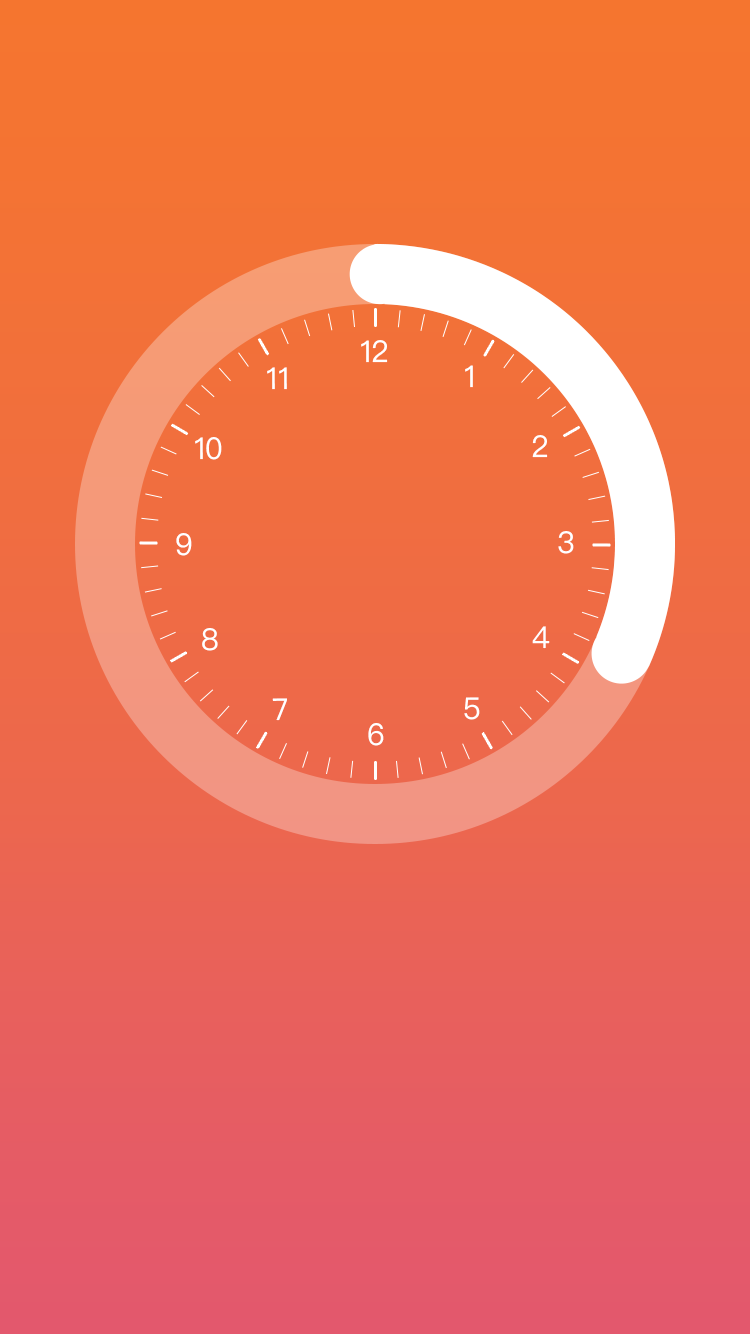
<style>
.page{position:relative;width:750px;height:1334px}
.page>*{position:absolute;margin:0}
.t1{font:30px "PingFangSC-Regular";letter-spacing:-0.02em;color:#ffffff}
</style>
<div class="page">
<p class="t1" style="left:361px;top:340px;width:27px;height:23px">12</p>
<p class="t1" style="left:465px;top:365px;width:8px;height:23px">1</p>
<p class="t1" style="left:267px;top:367px;width:20px;height:23px">11</p>
<p class="t1" style="left:195px;top:437px;width:27px;height:23px">10</p>
<p class="t1" style="left:532px;top:435px;width:16px;height:23px">2</p>
<p class="t1" style="left:176px;top:533px;width:16px;height:23px">9</p>
<p class="t1" style="left:558px;top:531px;width:16px;height:23px">3</p>
<p class="t1" style="left:202px;top:628px;width:16px;height:23px">8</p>
<p class="t1" style="left:532px;top:626px;width:18px;height:23px">4</p>
<p class="t1" style="left:272px;top:698px;width:15px;height:23px">7</p>
<p class="t1" style="left:464px;top:697px;width:16px;height:23px">5</p>
<p class="t1" style="left:368px;top:723px;width:16px;height:23px">6</p>
</div>
